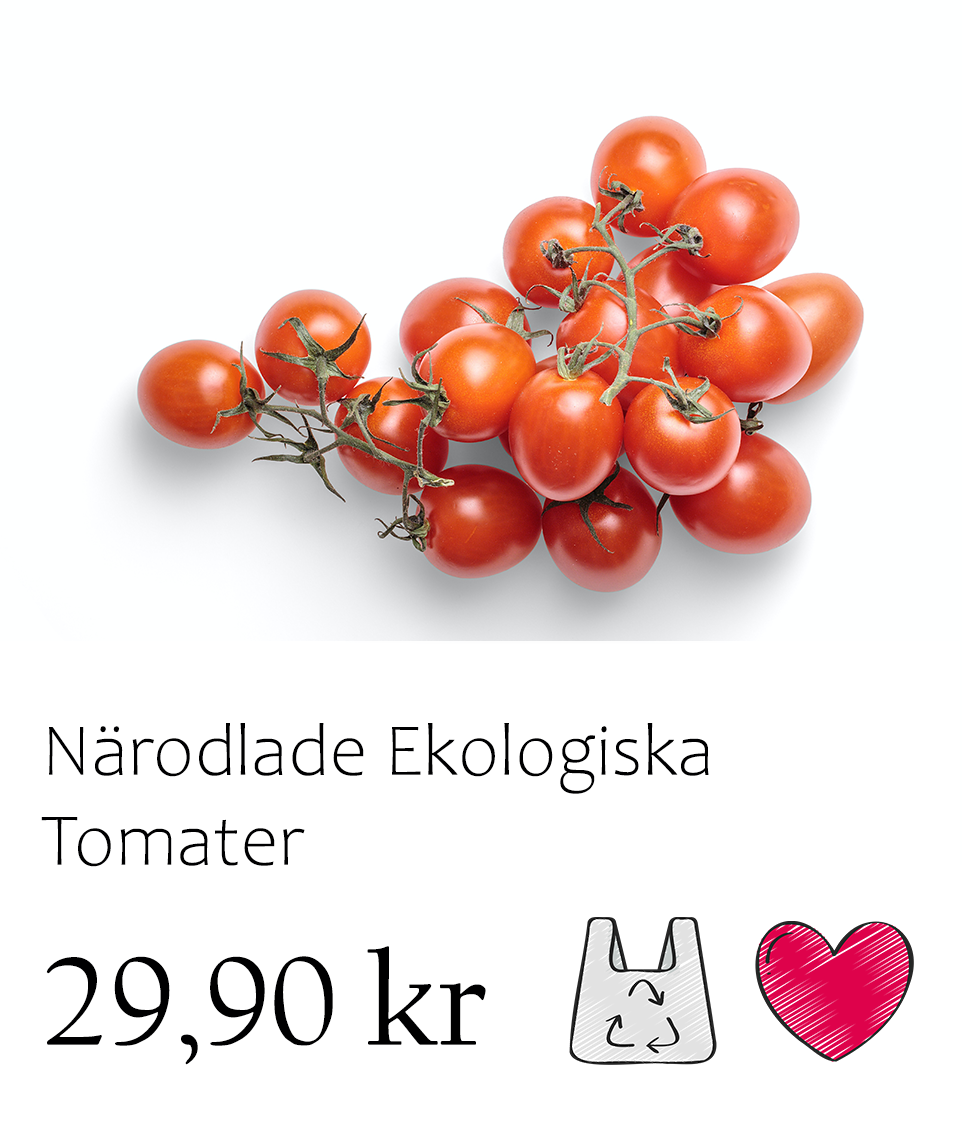
<style>
.page{position:relative;width:962px;height:1138px;background:#ffffff}
.page>*{position:absolute;margin:0}
.t1{font:75px "Candara-Light";color:#000001}
.t2{font:133.3px "CalifornianFB-Reg";color:#000001}
</style>
<div class="page">
<p class="t1" style="left:41px;top:723px;width:668px;height:144px">Närodlade Ekologiska Tomater</p>
<p class="t2" style="left:46px;top:946px;width:440px;height:119px">29,90 kr</p>
</div>
